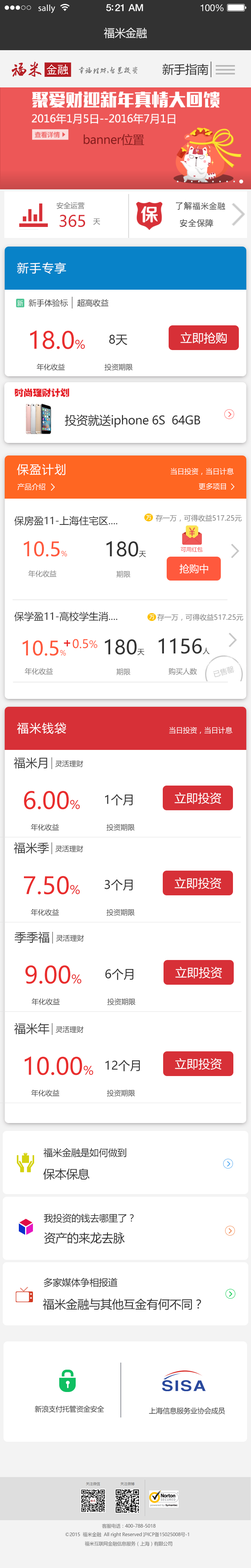
<style>
.page{position:relative;width:251px;height:1568px;background:#ffffff}
.page>*{position:absolute;margin:0}
.t1{font:9px "MyriadPro-Regular";letter-spacing:0.02em;color:#ffffff}
.t2{font:9.8px "HelveticaNeue-Medium";letter-spacing:-0.02em;color:#ffffff}
.t3{font:9.4px "HelveticaNeue";letter-spacing:-0.02em;color:#ffffff}
.t4{font:11px "MicrosoftYaHei";letter-spacing:-0.02em;color:#f3f3f3}
.t5{font:11.8px "MicrosoftYaHei";letter-spacing:-0.02em;color:#323232}
.t6{font:11.8px "MicrosoftYaHei";letter-spacing:-0.02em;color:#871d1d}
.t7{font:7.1px "MicrosoftYaHei";color:#6f6f6f}
.t8{font:7.8px "MicrosoftYaHei";letter-spacing:0.06em;color:#3d3d3d}
.t9{font:15.7px "MicrosoftYaHei";color:#d73037}
.t10{font:11.8px "MicrosoftYaHei";letter-spacing:0.06em;color:#ffffff}
.t11{font:7.8px "MicrosoftYaHei";color:#3d3d3d}
.t12{font:23.5px "MicrosoftYaHei";color:#e92d2d}
.t13{font:11.8px "MicrosoftYaHei";color:#e92d2d}
.t14{font:11.8px "MicrosoftYaHei";color:#323232}
.t15{font:11.8px "MicrosoftYaHei";color:#ffffff}
.t16{font:7.1px "MicrosoftYaHei";color:#454545}
.t17{font:9.4px "PiliEG-Ultra-GB";letter-spacing:-0.02em;color:#e61f27}
.t18{font:7.1px "MicrosoftYaHei";color:#ffffff}
.t19{font:9.8px "MicrosoftYaHei";color:#323232}
.t20{font:7.1px "MicrosoftYaHei";color:#7d7d7d}
.t21{font:19.6px "MicrosoftYaHei";color:#ff593d}
.t22{font:7.1px "MicrosoftYaHei";color:#ff593d}
.t23{font:19.6px "MicrosoftYaHei";color:#323232}
.t24{font:7.1px "MicrosoftYaHei";color:#323232}
.t25{font:5.5px "MicrosoftYaHei";color:#f44242}
.t26{font:9.8px "MicrosoftYaHei";color:#ffffff}
.t27{font:11.8px "MicrosoftYaHei";color:#ff593d}
.t28{font:9.8px "MicrosoftYaHei";color:#ff593d}
.t29{font:7.1px "MicrosoftYaHei";color:#c7c7c7}
.t30{font:11.8px "MicrosoftYaHei";color:#3d3d3d}
.t31{font:7.1px "MicrosoftYaHei";color:#3d3d3d}
.t32{font:9.4px "MicrosoftYaHei";letter-spacing:-0.02em;color:#323232}
.t33{font:7.1px "MicrosoftYaHei";letter-spacing:-0.02em;color:#323232}
.t34{font:4.7px "MicrosoftYaHei";letter-spacing:-0.02em;color:#646464}
</style>
<div class="page">
<p class="t1" style="left:38px;top:4px;width:17px;height:9px">sally</p>
<p class="t2" style="left:106px;top:4px;width:37px;height:7px">5:21 AM</p>
<p class="t3" style="left:200px;top:4px;width:23px;height:7px">100%</p>
<p class="t4" style="left:104px;top:27px;width:43px;height:11px">福米金融</p>
<p class="t5" style="left:162px;top:64px;width:46px;height:11px">新手指南</p>
<p class="t6" style="left:83px;top:134px;width:61px;height:11px">banner位置</p>
<p class="t7" style="left:56px;top:202px;width:29px;height:7px">安全运营</p>
<p class="t8" style="left:192px;top:202px;width:33px;height:8px">福米金融</p>
<p class="t9" style="left:60px;top:214px;width:25px;height:13px">365</p>
<p class="t7" style="left:93px;top:218px;width:7px;height:7px">天</p>
<p class="t10" style="left:17px;top:262px;width:49px;height:12px">新手专享</p>
<p class="t11" style="left:29px;top:299px;width:80px;height:8px">新手体验标    超高收益</p>
<p class="t12" style="left:30px;top:330px;width:55px;height:19px">18.0<span class="t13">%</span></p>
<p class="t14" style="left:109px;top:334px;width:18px;height:11px">8天</p>
<p class="t15" style="left:180px;top:332px;width:47px;height:12px">立即抢购</p>
<p class="t16" style="left:36px;top:363px;width:29px;height:8px">年化收益</p>
<p class="t16" style="left:104px;top:363px;width:29px;height:8px">投资期限</p>
<p class="t17" style="left:15px;top:388px;width:54px;height:9px">时尚理财计划</p>
<p class="t5" style="left:65px;top:414px;width:135px;height:14px">投资就送iphone 6S  64GB</p>
<p class="t10" style="left:17px;top:464px;width:48px;height:11px">保盈计划</p>
<p class="t18" style="left:171px;top:468px;width:63px;height:7px">当日投资，当日计息</p>
<p class="t18" style="left:17px;top:483px;width:28px;height:7px">产品介绍</p>
<p class="t18" style="left:198px;top:483px;width:28px;height:7px">更多项目</p>
<p class="t19" style="left:14px;top:516px;width:103px;height:10px">保房盈11-上海住宅区....</p>
<p class="t20" style="left:156px;top:515px;width:85px;height:7px">存一万，可得收益517.25元</p>
<p class="t21" style="left:24px;top:541px;width:43px;height:16px">10.5<span class="t22">%</span></p>
<p class="t23" style="left:106px;top:541px;width:40px;height:16px">180<span class="t24">天</span></p>
<p class="t25" style="left:181px;top:547px;width:22px;height:5px">可用红包</p>
<p class="t26" style="left:179px;top:564px;width:29px;height:10px">抢购中</p>
<p class="t20" style="left:28px;top:570px;width:28px;height:7px">年化收益</p>
<p class="t20" style="left:116px;top:571px;width:15px;height:7px">期限</p>
<p class="t19" style="left:14px;top:612px;width:103px;height:9px">保学盈11-高校学生消....</p>
<p class="t20" style="left:157px;top:614px;width:86px;height:7px">存一万，可得收益517.25元</p>
<p class="t21" style="left:22px;top:640px;width:44px;height:16px">10.5<span class="t22">%</span></p>
<p class="t27" style="left:73px;top:639px;width:15px;height:9px">0.5</p>
<p class="t28" style="left:89px;top:640px;width:8px;height:8px">%</p>
<p class="t23" style="left:105px;top:639px;width:39px;height:16px">180<span class="t24">天</span></p>
<p class="t23" style="left:158px;top:638px;width:52px;height:17px">1156<span class="t24">人</span></p>
<p class="t20" style="left:25px;top:668px;width:28px;height:7px">年化收益</p>
<p class="t20" style="left:116px;top:668px;width:15px;height:7px">期限</p>
<p class="t20" style="left:169px;top:668px;width:28px;height:7px">购买人数</p>
<p class="t29" style="left:213px;top:666px;width:21px;height:11px;rotate:-16deg">已售罄</p>
<p class="t10" style="left:17px;top:722px;width:49px;height:12px">福米钱袋</p>
<p class="t18" style="left:169px;top:727px;width:63px;height:7px">当日投资，当日计息</p>
<p class="t30" style="left:14px;top:757px;width:33px;height:12px">福米月</p>
<p class="t31" style="left:55px;top:760px;width:28px;height:7px">灵活理财</p>
<p class="t12" style="left:24px;top:791px;width:56px;height:18px">6.00<span class="t13">%</span></p>
<p class="t14" style="left:105px;top:794px;width:27px;height:12px">1个月</p>
<p class="t15" style="left:174px;top:792px;width:47px;height:12px">立即投资</p>
<p class="t16" style="left:31px;top:824px;width:28px;height:7px">年化收益</p>
<p class="t16" style="left:106px;top:824px;width:29px;height:7px">投资期限</p>
<p class="t30" style="left:14px;top:842px;width:35px;height:12px">福米季</p>
<p class="t31" style="left:55px;top:845px;width:28px;height:7px">灵活理财</p>
<p class="t12" style="left:24px;top:876px;width:56px;height:19px">7.50<span class="t13">%</span></p>
<p class="t14" style="left:105px;top:879px;width:27px;height:12px">3个月</p>
<p class="t15" style="left:174px;top:877px;width:47px;height:12px">立即投资</p>
<p class="t16" style="left:31px;top:909px;width:28px;height:7px">年化收益</p>
<p class="t16" style="left:106px;top:909px;width:29px;height:7px">投资期限</p>
<p class="t30" style="left:15px;top:931px;width:34px;height:12px">季季福</p>
<p class="t31" style="left:56px;top:935px;width:28px;height:7px">灵活理财</p>
<p class="t12" style="left:25px;top:965px;width:57px;height:19px">9.00<span class="t13">%</span></p>
<p class="t14" style="left:105px;top:969px;width:28px;height:11px">6个月</p>
<p class="t15" style="left:175px;top:967px;width:47px;height:11px">立即投资</p>
<p class="t16" style="left:31px;top:998px;width:29px;height:7px">年化收益</p>
<p class="t16" style="left:107px;top:998px;width:29px;height:7px">投资期限</p>
<p class="t30" style="left:14px;top:1023px;width:35px;height:11px">福米年</p>
<p class="t31" style="left:55px;top:1026px;width:28px;height:7px">灵活理财</p>
<p class="t12" style="left:25px;top:1056px;width:68px;height:19px">10.00<span class="t13">%</span></p>
<p class="t14" style="left:105px;top:1060px;width:35px;height:11px">12个月</p>
<p class="t15" style="left:175px;top:1058px;width:47px;height:12px">立即投资</p>
<p class="t16" style="left:31px;top:1089px;width:29px;height:8px">年化收益</p>
<p class="t16" style="left:107px;top:1089px;width:28px;height:8px">投资期限</p>
<p class="t32" style="left:44px;top:1148px;width:82px;height:10px">福米金融是如何做到</p>
<p class="t5" style="left:43px;top:1168px;width:47px;height:12px">保本保息</p>
<p class="t32" style="left:44px;top:1213px;width:90px;height:10px">我投资的钱去哪里了？</p>
<p class="t5" style="left:44px;top:1232px;width:81px;height:12px">资产的来龙去脉</p>
<p class="t32" style="left:44px;top:1278px;width:74px;height:9px">多家媒体争相报道</p>
<p class="t5" style="left:43px;top:1298px;width:158px;height:12px">福米金融与其他互金有何不同？</p>
<p class="t33" style="left:35px;top:1405px;width:69px;height:8px">新浪支付托管资金安全</p>
<p class="t33" style="left:149px;top:1407px;width:76px;height:7px">上海信息服务业协会成员</p>
<p class="t34" style="left:102px;top:1524px;width:54px;height:4px">客服电话：400-788-5018</p>
<p class="t34" style="left:65px;top:1532px;width:77px;height:5px">©2015  福米金融  All right Reserved</p>
<p class="t34" style="left:85px;top:1541px;width:87px;height:5px">福米互联网金融信息服务（上海）有限公司</p>
<p class="t34" style="left:143px;top:1532px;width:46px;height:5px">沪ICP备15025008号-1</p>
</div>
